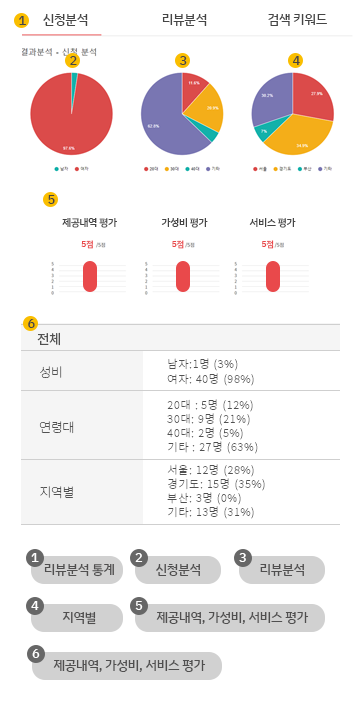
<style>
.page{position:relative;width:360px;height:705px;background:#ffffff}
.page>*{position:absolute;margin:0}
.t1{font:13px "IBMPlexSansKR-Medium";letter-spacing:-0.02em;color:#454545}
.t2{font:10px "IBMPlexSansKR-Medium";letter-spacing:-0.02em;color:#454545}
.t3{font:8.4px "IBMPlexSansKR-Medium";letter-spacing:-0.02em;color:#e9494b}
.t4{font:13px "NotoSansKR-Regular";letter-spacing:-0.02em;color:#515151}
.t5{font:13px/55px "NotoSansKR-Thin";letter-spacing:-0.02em;color:#515151}
.t6{font:11px/15px "NotoSansKR-Thin";letter-spacing:0.08em;color:#515151}
.t7{font:11px/14px "NotoSansKR-Thin";letter-spacing:0.08em;color:#515151}
.t8{font:13px "NotoSansKR-Thin";letter-spacing:-0.02em;color:#515151}
.t9{font:13px "IBMPlexSansKR-Medium";letter-spacing:-0.02em;color:#ffffff}
.t10{font:13px "IBMPlexSansKR-Medium";letter-spacing:-0.02em;color:#504f4f}
</style>
<div class="page">
<p class="t1" style="left:19px;top:16px;width:7px;height:9px">1</p>
<p class="t1" style="left:43px;top:14px;width:45px;height:12px">신청분석</p>
<p class="t1" style="left:162px;top:14px;width:45px;height:12px">리뷰분석</p>
<p class="t1" style="left:268px;top:14px;width:59px;height:12px">검색 키워드</p>
<p class="t1" style="left:70px;top:56px;width:7px;height:9px">2</p>
<p class="t1" style="left:179px;top:56px;width:8px;height:9px">3</p>
<p class="t1" style="left:292px;top:56px;width:8px;height:9px">4</p>
<p class="t1" style="left:48px;top:195px;width:7px;height:9px">5</p>
<p class="t2" style="left:62px;top:218px;width:55px;height:10px">제공내역 평가</p>
<p class="t2" style="left:161px;top:218px;width:47px;height:10px">가성비 평가</p>
<p class="t2" style="left:249px;top:218px;width:47px;height:10px">서비스 평가</p>
<p class="t3" style="left:81px;top:240px;width:12px;height:9px">5점</p>
<p class="t3" style="left:172px;top:240px;width:12px;height:9px">5점</p>
<p class="t3" style="left:261px;top:240px;width:13px;height:9px">5점</p>
<p class="t1" style="left:28px;top:319px;width:7px;height:9px">6</p>
<p class="t4" style="left:37px;top:332px;width:23px;height:14px">전체</p>
<p class="t5" style="left:39px;top:366px;width:35px;height:68px">성비<br>연령대</p>
<p class="t6" style="left:167px;top:358px;width:87px;height:28px">남자:1명 (3%)<br>여자: 40명 (98%)</p>
<p class="t7" style="left:167px;top:399px;width:91px;height:55px">20대 : 5명 (12%)<br>30대: 9명 (21%)<br>40대: 2명 (5%)<br>기타 : 27명 (63%)</p>
<p class="t7" style="left:167px;top:464px;width:98px;height:55px">서울: 12명 (28%)<br>경기도: 15명 (35%)<br>부산: 3명 (0%)<br>기타: 13명 (31%)</p>
<p class="t8" style="left:40px;top:486px;width:33px;height:13px">지역별</p>
<p class="t9" style="left:31px;top:553px;width:8px;height:9px">1</p>
<p class="t9" style="left:135px;top:553px;width:8px;height:9px">2</p>
<p class="t9" style="left:239px;top:553px;width:7px;height:9px">3</p>
<p class="t10" style="left:44px;top:564px;width:70px;height:13px">리뷰분석 통계</p>
<p class="t10" style="left:156px;top:564px;width:44px;height:12px">신청분석</p>
<p class="t10" style="left:260px;top:564px;width:44px;height:12px">리뷰분석</p>
<p class="t9" style="left:31px;top:601px;width:8px;height:9px">4</p>
<p class="t9" style="left:135px;top:601px;width:8px;height:9px">5</p>
<p class="t10" style="left:62px;top:611px;width:34px;height:14px">지역별</p>
<p class="t10" style="left:156px;top:612px;width:153px;height:12px">제공내역, 가성비, 서비스 평가</p>
<p class="t9" style="left:32px;top:649px;width:8px;height:9px">6</p>
<p class="t10" style="left:53px;top:660px;width:153px;height:12px">제공내역, 가성비, 서비스 평가</p>
</div>
